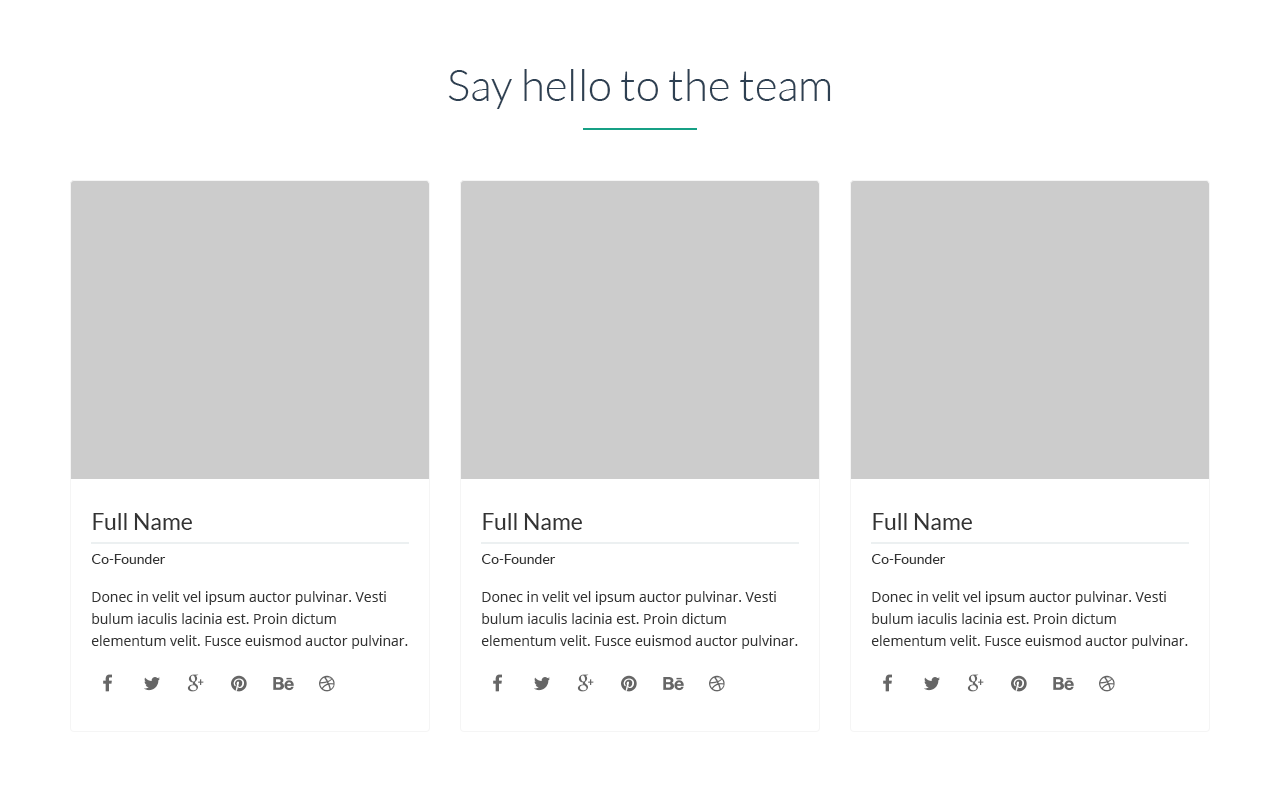
<style>
.page{position:relative;width:1280px;height:812px;background:#ffffff}
.page>*{position:absolute;margin:0}
.t1{font:44px "Lato-Light";color:#2e4052}
.t2{font:23px "Lato-Regular";color:#333333}
.t3{font:14px "Lato-Regular";color:#333333}
.t4{font:14px/22px "OpenSans";color:#333333}
</style>
<div class="page">
<p class="t1" style="left:448px;top:69px;width:383px;height:40px">Say hello to the team</p>
<p class="t2" style="left:93px;top:513px;width:99px;height:17px">Full Name</p>
<p class="t2" style="left:483px;top:513px;width:99px;height:17px">Full Name</p>
<p class="t2" style="left:873px;top:513px;width:99px;height:17px">Full Name</p>
<p class="t3" style="left:92px;top:554px;width:74px;height:10px">Co-Founder</p>
<p class="t3" style="left:482px;top:554px;width:74px;height:10px">Co-Founder</p>
<p class="t3" style="left:872px;top:554px;width:74px;height:10px">Co-Founder</p>
<p class="t4" style="left:91px;top:591px;width:317px;height:58px">Donec in velit vel ipsum auctor pulvinar. Vesti bulum iaculis lacinia est. Proin dictum elementum velit. Fusce euismod auctor pulvinar.</p>
<p class="t4" style="left:481px;top:591px;width:317px;height:58px">Donec in velit vel ipsum auctor pulvinar. Vesti bulum iaculis lacinia est. Proin dictum elementum velit. Fusce euismod auctor pulvinar.</p>
<p class="t4" style="left:871px;top:591px;width:317px;height:58px">Donec in velit vel ipsum auctor pulvinar. Vesti bulum iaculis lacinia est. Proin dictum elementum velit. Fusce euismod auctor pulvinar.</p>
</div>
